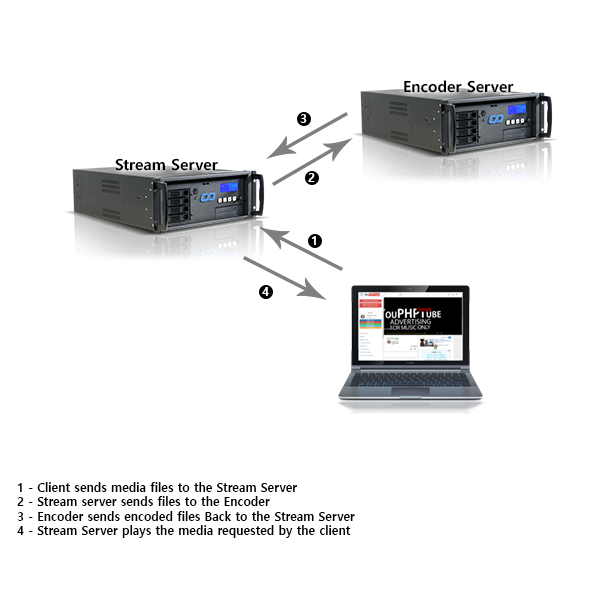
<style>
.page{position:relative;width:600px;height:600px;background:#ffffff}
.page>*{position:absolute;margin:0}
.t1{font:15.3px "MalgunGothicBold";color:#000000}
.t2{font:12px "MalgunGothicBold";color:#ffffff}
.t3{font:12px "MalgunGothicBold";color:#000000}
</style>
<div class="page">
<p class="t1" style="left:404px;top:80px;width:110px;height:13px">Encoder Server</p>
<p class="t2" style="left:300px;top:114px;width:7px;height:9px">3</p>
<p class="t1" style="left:115px;top:158px;width:103px;height:13px">Stream Server</p>
<p class="t2" style="left:308px;top:173px;width:7px;height:9px">2</p>
<p class="t2" style="left:312px;top:236px;width:4px;height:9px">1</p>
<p class="t2" style="left:262px;top:287px;width:7px;height:9px">4</p>
<p class="t3" style="left:17px;top:482px;width:338px;height:56px">1 - Client sends media files to the Stream Server<br>2 - Stream server sends files to the Encoder<br>3 - Encoder sends encoded files Back to the Stream Server<br>4 - Stream Server plays the media requested by the client</p>
</div>
